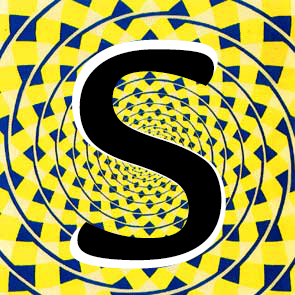
<style>
.page{position:relative;width:295px;height:295px}
.page>*{position:absolute;margin:0}
.t1{font:333.1px "Kefa-Regular";color:#000000}
.t2{font:307.3px "Kefa-Regular";color:#000000}
</style>
<div class="page">
<p class="t1" style="left:69px;top:39px;width:157px;height:230px">S</p>
<p class="t2" style="left:77px;top:49px;width:145px;height:212px">S</p>
</div>
